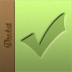
<style>
.page{position:relative;width:72px;height:72px}
.page>*{position:absolute;margin:0}
.t1{font:11.2px "SantaFeLetPlain";color:#70511d}
</style>
<div class="page">
<p class="t1" style="left:4px;top:23px;width:8px;height:26px;rotate:-90deg">Docket</p>
</div>
